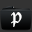
<style>
.page{position:relative;width:32px;height:32px;background:#333333}
.page>*{position:absolute;margin:0}
.t1{font:19.3px "LucidaBlackletter";color:#ffffff;scale:1.04 1}
</style>
<div class="page">
<p class="t1" style="left:11px;top:12px;width:11px;height:15px">p</p>
</div>
